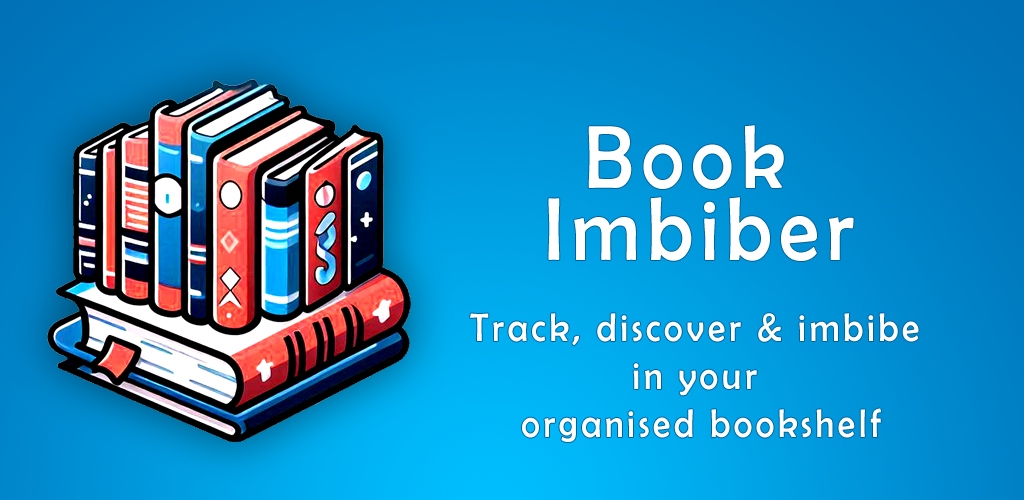
<style>
.page{position:relative;width:1024px;height:500px}
.page>*{position:absolute;margin:0}
.t1{font:90px/72px "BerlinSansFB-Reg";letter-spacing:0.1em;color:#ffffff;scale:0.9 1}
.t2{font:40px "BerlinSansFB-Reg";letter-spacing:0.1em;color:#ffffff;scale:0.9 1}
</style>
<div class="page">
<p class="t1" style="left:548px;top:125px;width:306px;height:136px;text-align:center">Book <br>Imbiber</p>
<p class="t2" style="left:470px;top:313px;width:449px;height:129px;text-align:center">Track, discover &amp; imbibe <br>in your <br>organised bookshelf</p>
</div>
